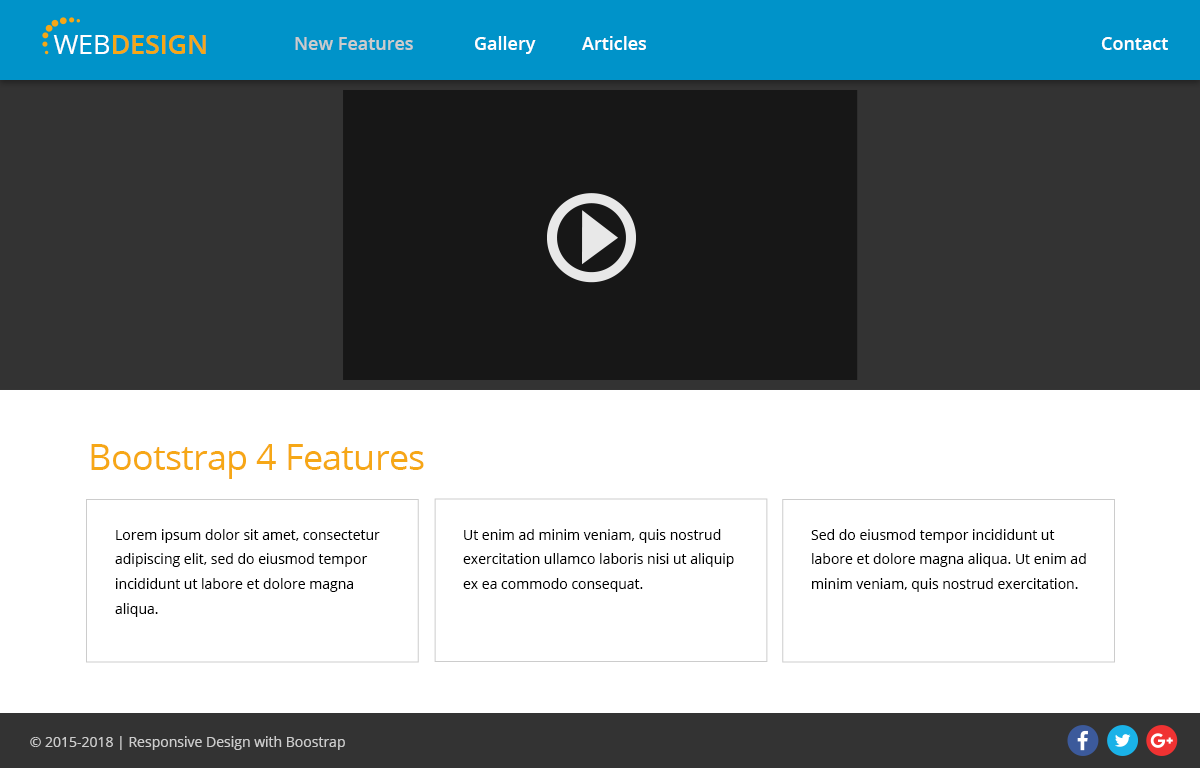
<style>
.page{position:relative;width:1200px;height:768px;background:#ffffff}
.page>*{position:absolute;margin:0}
.t1{font:26.7px "OpenSans-Semibold";color:#f6a716}
.t2{font:26.7px "OpenSans";color:#ffffff}
.t3{font:18px "OpenSans-Semibold";color:#ffffff}
.t4{font:18px "OpenSans-Semibold";color:#cccccc}
.t5{font:36px "OpenSans";letter-spacing:-0.02em;color:#f6a716}
.t6{font:14px/24.8px "OpenSans";color:#000000}
.t7{font:14px "OpenSans";color:#cccccc}
</style>
<div class="page">
<p class="t1" style="left:53px;top:35px;width:153px;height:19px"><span class="t2">WEB</span>DESIGN</p>
<p class="t3" style="left:295px;top:36px;width:351px;height:18px"><span class="t4">New Features</span>  Gallery  Articles</p>
<p class="t3" style="left:1101px;top:37px;width:67px;height:13px">Contact</p>
<p class="t5" style="left:91px;top:444px;width:333px;height:35px">Bootstrap 4 Features</p>
<p class="t6" style="left:115px;top:529px;width:265px;height:88px">Lorem ipsum dolor sit amet, consectetur adipiscing elit, sed do eiusmod tempor incididunt ut labore et dolore magna aliqua.</p>
<p class="t6" style="left:463px;top:529px;width:271px;height:63px">Ut enim ad minim veniam, quis nostrud exercitation ullamco laboris nisi ut aliquip ex ea commodo consequat.</p>
<p class="t6" style="left:811px;top:529px;width:275px;height:63px">Sed do eiusmod tempor incididunt ut labore et dolore magna aliqua. Ut enim ad minim veniam, quis nostrud exercitation.</p>
<p class="t7" style="left:30px;top:736px;width:315px;height:14px">© 2015-2018 | Responsive Design with Boostrap</p>
</div>
